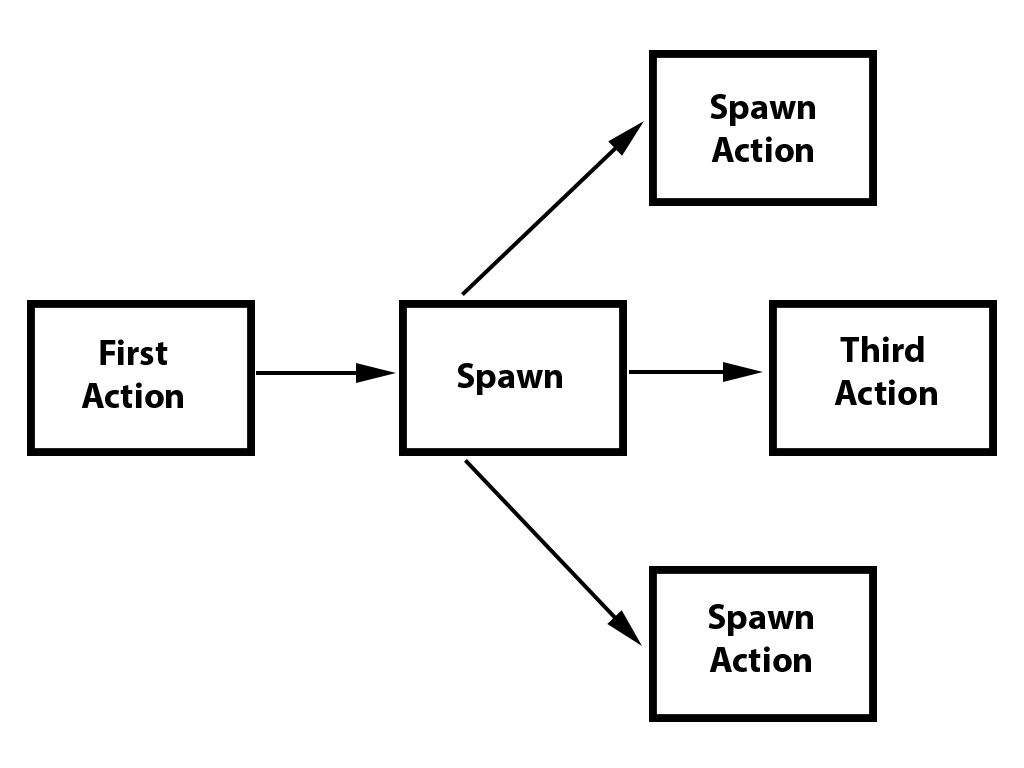
<style>
.page{position:relative;width:1024px;height:768px;background:#ffffff}
.page>*{position:absolute;margin:0}
.t1{font:36px "MyriadPro-Bold";color:#000000}
</style>
<div class="page">
<p class="t1" style="left:710px;top:94px;width:105px;height:68px;text-align:center">Spawn <br>Action</p>
<p class="t1" style="left:81px;top:339px;width:102px;height:69px;text-align:center">First <br>Action</p>
<p class="t1" style="left:834px;top:336px;width:103px;height:69px;text-align:center">Third<br> Action</p>
<p class="t1" style="left:457px;top:363px;width:105px;height:32px">Spawn</p>
<p class="t1" style="left:708px;top:604px;width:105px;height:68px;text-align:center">Spawn <br>Action</p>
</div>
